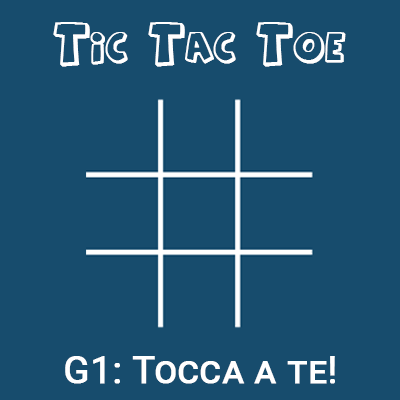
<style>
.page{position:relative;width:400px;height:400px;background:#174c6d}
.page>*{position:absolute;margin:0}
.t1{font:40px "AgentOrange";color:#ffffff;font-variant:small-caps;font-weight:bold}
.t2{font:37.8px "Roboto-Regular";color:#ffffff;font-variant:small-caps;font-weight:bold}
</style>
<div class="page">
<p class="t1" style="left:53px;top:22px;width:293px;height:45px">Tic Tac Toe</p>
<p class="t2" style="left:65px;top:356px;width:270px;height:28px">G1: Tocca a te!</p>
</div>
